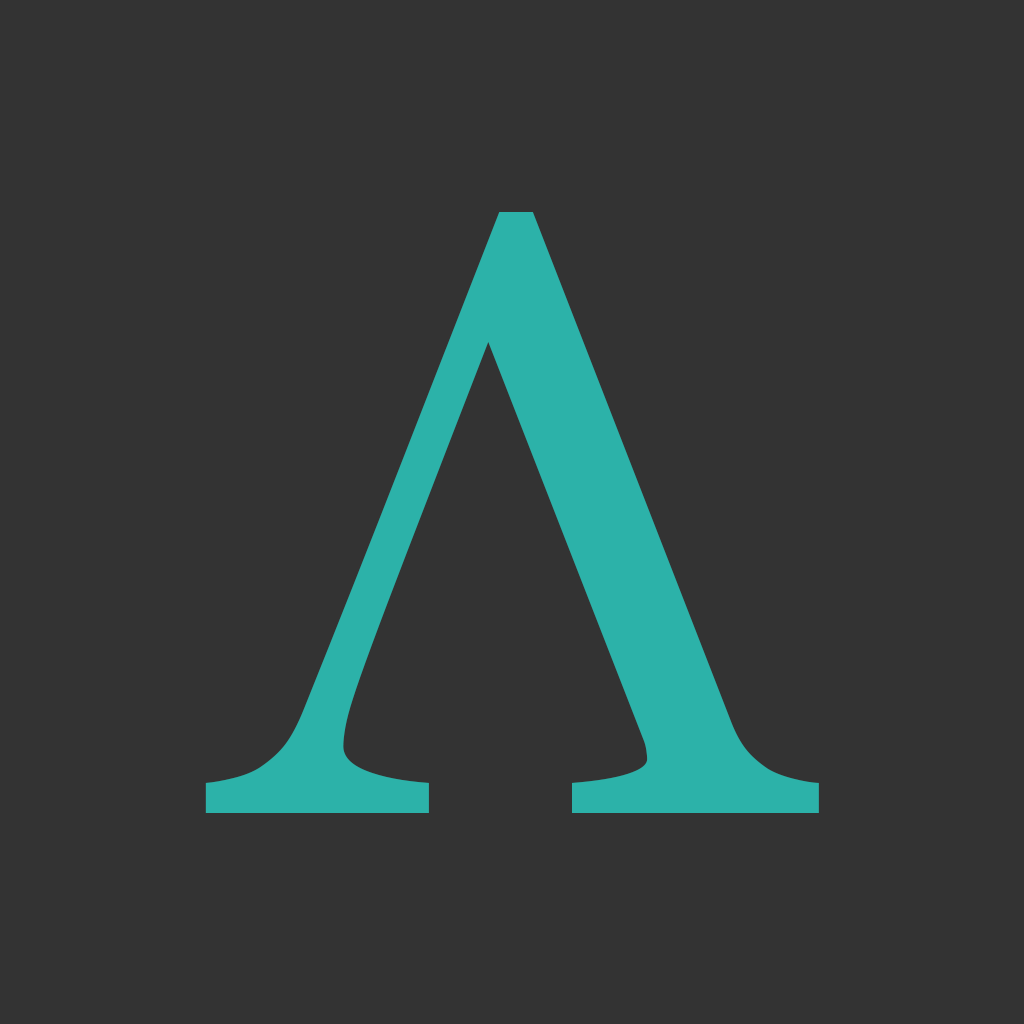
<style>
.page{position:relative;width:1024px;height:1024px;background:#333333}
.page>*{position:absolute;margin:0}
.t1{font:855px "Georgia";color:#2cb2a9}
</style>
<div class="page">
<p class="t1" style="left:205px;top:212px;width:614px;height:601px">Λ</p>
</div>
